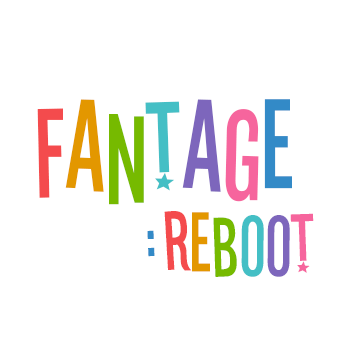
<style>
.page{position:relative;width:350px;height:350px;background:#ffffff}
.page>*{position:absolute;margin:0}
.t1{font:120px "Stereofidelic-Regular";color:#f44b4d}
.t2{font:120px "Stereofidelic-Regular";color:#e39700}
.t3{font:120px "Stereofidelic-Regular";color:#76ba00}
.t4{font:120px "Stereofidelic-Regular";color:#44bfc5}
.t5{font:120px "Stereofidelic-Regular";color:#7d66bc}
.t6{font:120px "Stereofidelic-Regular";color:#f6659d}
.t7{font:120px "Stereofidelic-Regular";color:#338ac7}
.t8{font:80px "Stereofidelic-Regular";color:#f44b4d}
.t9{font:80px "Stereofidelic-Regular";color:#e39700}
.t10{font:80px "Stereofidelic-Regular";color:#76ba00}
.t11{font:80px "Stereofidelic-Regular";color:#44bfc5}
.t12{font:80px "Stereofidelic-Regular";color:#7d66bc}
.t13{font:80px "Stereofidelic-Regular";color:#f6659d}
.t14{font:80px "Stereofidelic-Regular";color:#338ac7}
</style>
<div class="page">
<p class="t1" style="left:37px;top:99px;width:255px;height:106px">F<span class="t2">a</span><span class="t3">n</span><span class="t4">t</span><span class="t5">a</span><span class="t6">g</span><span class="t7">e</span></p>
<p class="t8" style="left:164px;top:211px;width:150px;height:66px">r<span class="t9">e</span><span class="t10">b</span><span class="t11">o</span><span class="t12">o</span><span class="t13">t</span></p>
<p class="t14" style="left:147px;top:230px;width:8px;height:27px">:</p>
</div>
